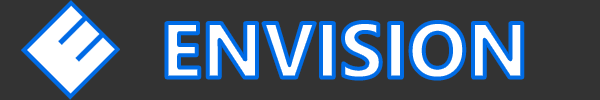
<style>
.page{position:relative;width:600px;height:100px;background:#333333}
.page>*{position:absolute;margin:0}
.t1{font:77.8px "SegoeUI-Bold";color:#ffffff}
</style>
<div class="page">
<p class="t1" style="left:166px;top:22px;width:357px;height:57px">ENVISION</p>
</div>
